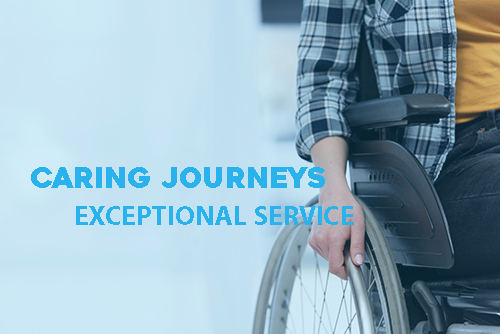
<style>
.page{position:relative;width:500px;height:334px}
.page>*{position:absolute;margin:0}
.t1{font:28px "Heavitas";color:#29b2ec;text-transform:uppercase}
.t2{font:28px "MyriadPro-Bold";color:#29b2ec;text-transform:uppercase}
</style>
<div class="page">
<p class="t1" style="left:31px;top:167px;width:294px;height:21px">Caring Journeys</p>
<p class="t2" style="left:76px;top:206px;width:278px;height:19px">Exceptional Service</p>
</div>
